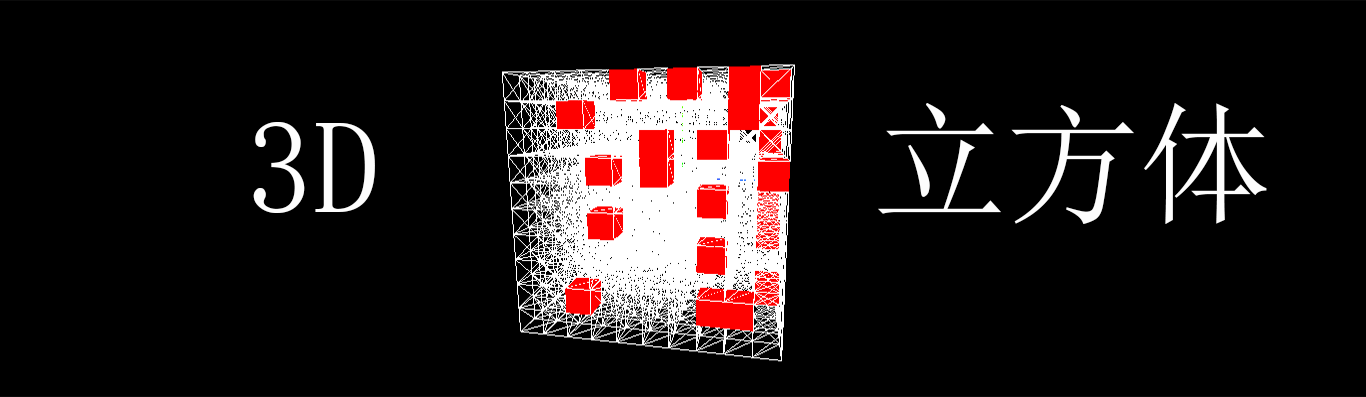
<style>
.page{position:relative;width:1366px;height:397px;background:#000000}
.page>*{position:absolute;margin:0}
.t1{font:133.3px "SimSun";color:#fdfdfd}
</style>
<div class="page">
<p class="t1" style="left:878px;top:103px;width:389px;height:121px">立方体</p>
<p class="t1" style="left:253px;top:122px;width:122px;height:91px">3D</p>
</div>
